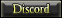
<style>
.page{position:relative;width:62px;height:18px}
.page>*{position:absolute;margin:0}
.t1{font:10px "Chantelli-Antiqua";color:#dee279}
</style>
<div class="page">
<p class="t1" style="left:12px;top:3px;width:38px;height:11px">Discord</p>
</div>
